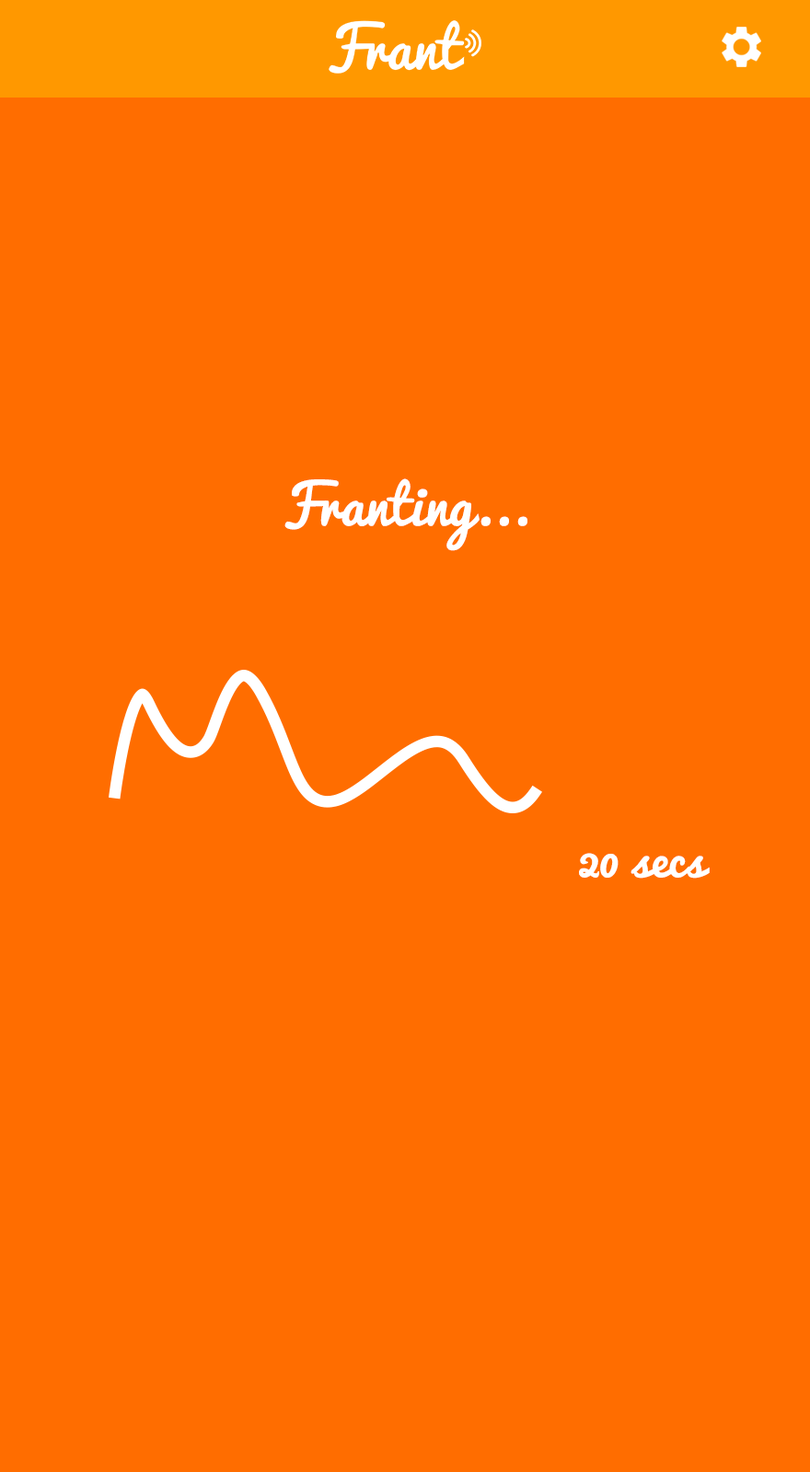
<style>
.page{position:relative;width:810px;height:1472px;background:#ff6d00}
.page>*{position:absolute;margin:0}
.t1{font:53.7px "Pacifico-Regular";color:#ffffff}
.t2{font:46px "Pacifico-Regular";color:#ffffff}
</style>
<div class="page">
<p class="t1" style="left:284px;top:479px;width:243px;height:72px">Franting...</p>
<p class="t2" style="left:579px;top:853px;width:131px;height:26px">20 secs</p>
</div>
